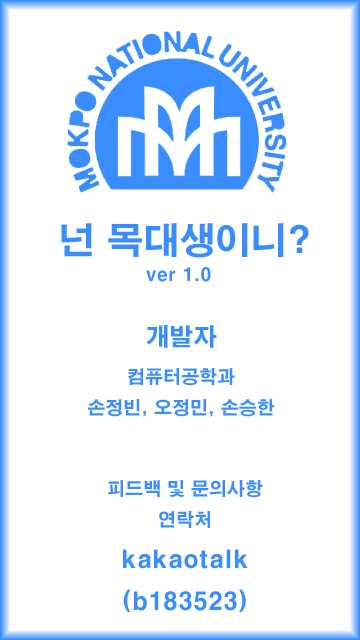
<style>
.page{position:relative;width:360px;height:640px;background:#ffffff}
.page>*{position:absolute;margin:0}
.t1{font:18px "H2gtrE";color:#398dff}
.t2{font:24px "H2gtrE";color:#398dff}
</style>
<div class="page">
<p class="t1" style="left:146px;top:267px;width:65px;height:15px">ver 1.0</p>
<p class="t1" style="left:88px;top:325px;width:187px;height:92px;text-align:center"><span class="t2">개발자<br></span>컴퓨터공학과 <br>손정빈, 오정민, 손승한</p>
<p class="t1" style="left:108px;top:480px;width:155px;height:48px;text-align:center">피드백 및 문의사항<br>연락처</p>
<p class="t2" style="left:123px;top:549px;width:125px;height:63px;text-align:center">kakaotalk<br>(b183523)</p>
</div>
